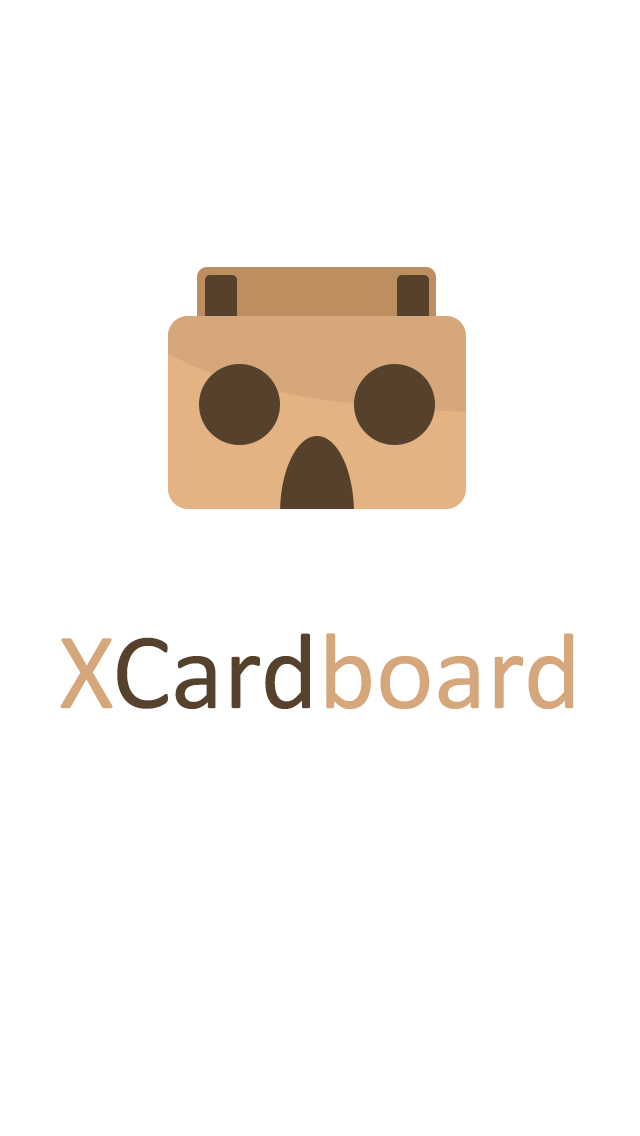
<style>
.page{position:relative;width:640px;height:1136px;background:#ffffff}
.page>*{position:absolute;margin:0}
.t1{font:110px "Calibri";color:#d6a77a}
.t2{font:110px "Calibri";color:#56422c}
</style>
<div class="page">
<p class="t1" style="left:60px;top:633px;width:514px;height:76px">X<span class="t2">Card</span>board</p>
</div>
